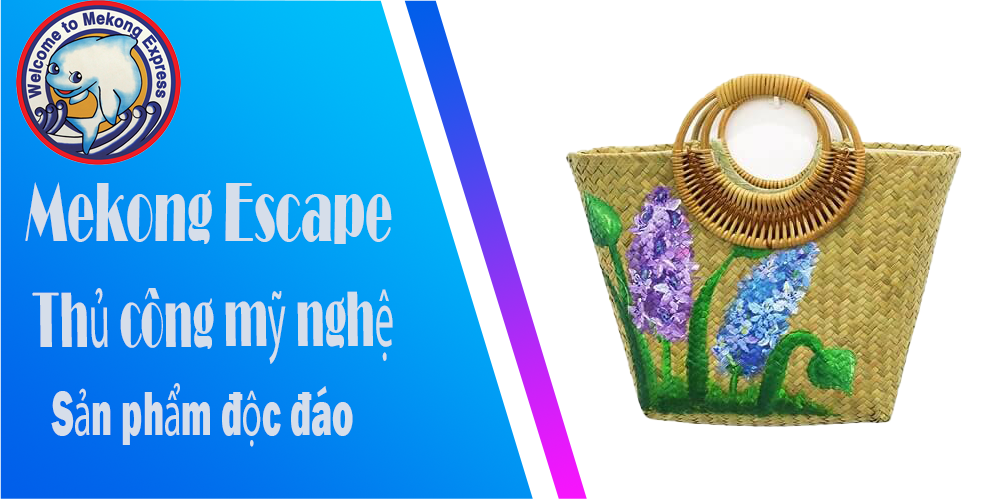
<style>
.page{position:relative;width:1000px;height:500px;background:#ffffff}
.page>*{position:absolute;margin:0}
.t1{font:86.7px "Broadway";color:#d6deea;scale:0.52 1}
.t2{font:81.6px "Broadway";color:#d6deea;scale:0.47 1}
.t3{font:81.6px "MyriadPro-Regular";color:#d6deea;scale:0.47 1}
.t4{font:64px "FranklinGothic-Heavy";color:#d6deea;scale:0.56 1}
.t5{font:64px "MyriadPro-Regular";color:#d6deea;scale:0.56 1}
</style>
<div class="page">
<p class="t1" style="left:25px;top:182px;width:367px;height:62px">Mekong Escape</p>
<p class="t2" style="left:32px;top:288px;width:361px;height:76px">Th<span class="t3">ủ</span> công m<span class="t3">ỹ</span> ngh<span class="t3">ệ</span></p>
<p class="t4" style="left:51px;top:383px;width:302px;height:64px">S<span class="t5">ả</span>n ph<span class="t5">ẩ</span>m đ<span class="t5">ộ</span>c đáo</p>
</div>
